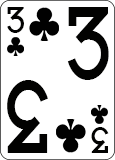
<style>
.page{position:relative;width:115px;height:160px;background:#ffffff}
.page>*{position:absolute;margin:0}
.t1{font:31.1px "CardCharacters";color:#020201;scale:0.95 1}
.t2{font:86.4px "CardCharacters";color:#020201;scale:0.83 1}
</style>
<div class="page">
<p class="t1" style="left:7px;top:7px;width:17px;height:26px">3</p>
<p class="t2" style="left:67px;top:7px;width:42px;height:73px">3</p>
<p class="t2" style="left:7px;top:80px;width:41px;height:73px;rotate:180deg">3</p>
<p class="t1" style="left:91px;top:127px;width:18px;height:26px;rotate:180deg">3</p>
</div>
